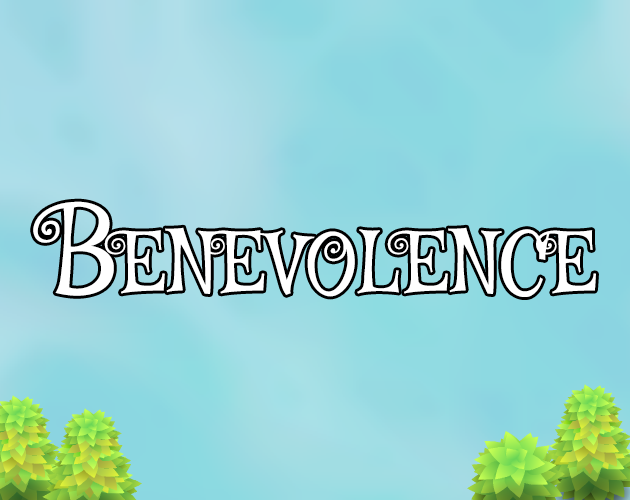
<style>
.page{position:relative;width:630px;height:500px}
.page>*{position:absolute;margin:0}
.t1{font:119px "MysteryQuest";color:#ffffff;font-variant:small-caps}
</style>
<div class="page">
<p class="t1" style="left:33px;top:201px;width:563px;height:96px">Benevolence</p>
</div>
